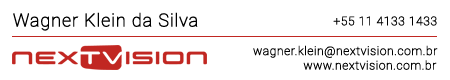
<style>
.page{position:relative;width:450px;height:80px;background:#ffffff}
.page>*{position:absolute;margin:0}
.t1{font:18px "Heebo-Thin";letter-spacing:0.025em;color:#000000;font-weight:bold}
.t2{font:12px "Heebo-Thin";letter-spacing:0.025em;color:#000000;font-weight:bold}
</style>
<div class="page">
<p class="t1" style="left:13px;top:12px;width:185px;height:19px">Wagner Klein da Silva</p>
<p class="t2" style="left:333px;top:16px;width:104px;height:10px">+55 11 4133 1433</p>
<p class="t2" style="left:253px;top:45px;width:185px;height:13px">wagner.klein@nextvision.com.br</p>
<p class="t2" style="left:303px;top:60px;width:134px;height:10px">www.nextvision.com.br</p>
</div>
